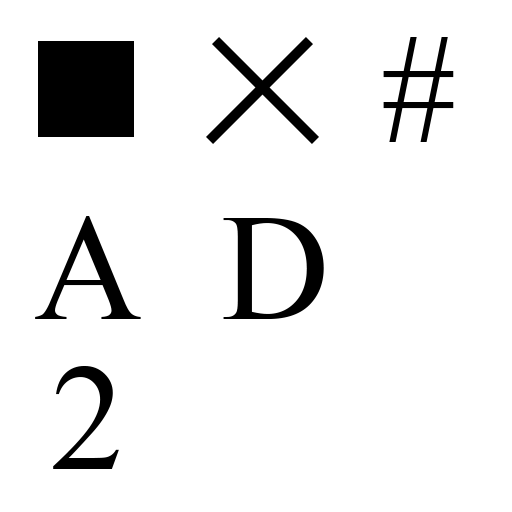
<style>
.page{position:relative;width:512px;height:512px;background:#ffffff}
.page>*{position:absolute;margin:0}
.t1{font:151.5px "TimesNewRomanPSMT";color:#000000}
</style>
<div class="page">
<p class="t1" style="left:383px;top:37px;width:71px;height:105px">#</p>
<p class="t1" style="left:35px;top:216px;width:106px;height:103px">A</p>
<p class="t1" style="left:223px;top:218px;width:101px;height:101px">D</p>
<p class="t1" style="left:53px;top:366px;width:66px;height:103px">2</p>
</div>
